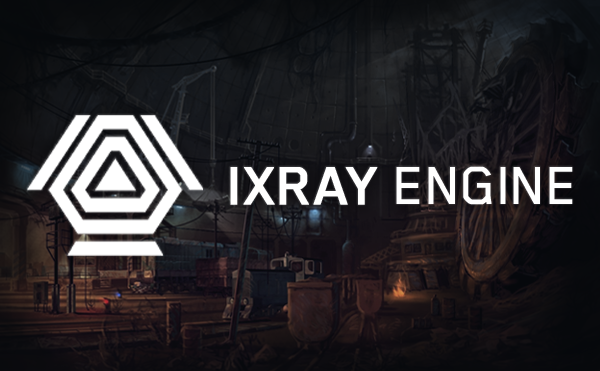
<style>
.page{position:relative;width:600px;height:371px}
.page>*{position:absolute;margin:0}
.t1{font:54px "FONTSPRINGDEMO-CAMechanoRegular";color:#ffffff}
.t2{font:54px "FONTSPRINGDEMO-CAMechanoRegular";color:#ffffff;font-weight:bold}
.t3{font:61.8px "BlenderPro-Medium";color:#ffffff}
.t4{font:61.8px "BlenderPro-Medium";color:#ffffff;font-weight:bold}
.t5{font:32px "FONTSPRINGDEMO-CAMechanoRegular";color:#ffffff}
</style>
<div class="page">
<p class="t1" style="left:230px;top:148px;width:343px;height:39px"><span class="t2">IXRAY</span> ENGINE</p>
<p class="t3" style="left:230px;top:166px;width:343px;height:39px"><span class="t4">IXRAY</span> ENGINE</p>
<p class="t5" style="left:229px;top:197px;width:224px;height:23px">ACTOR EDITOR</p>
</div>
